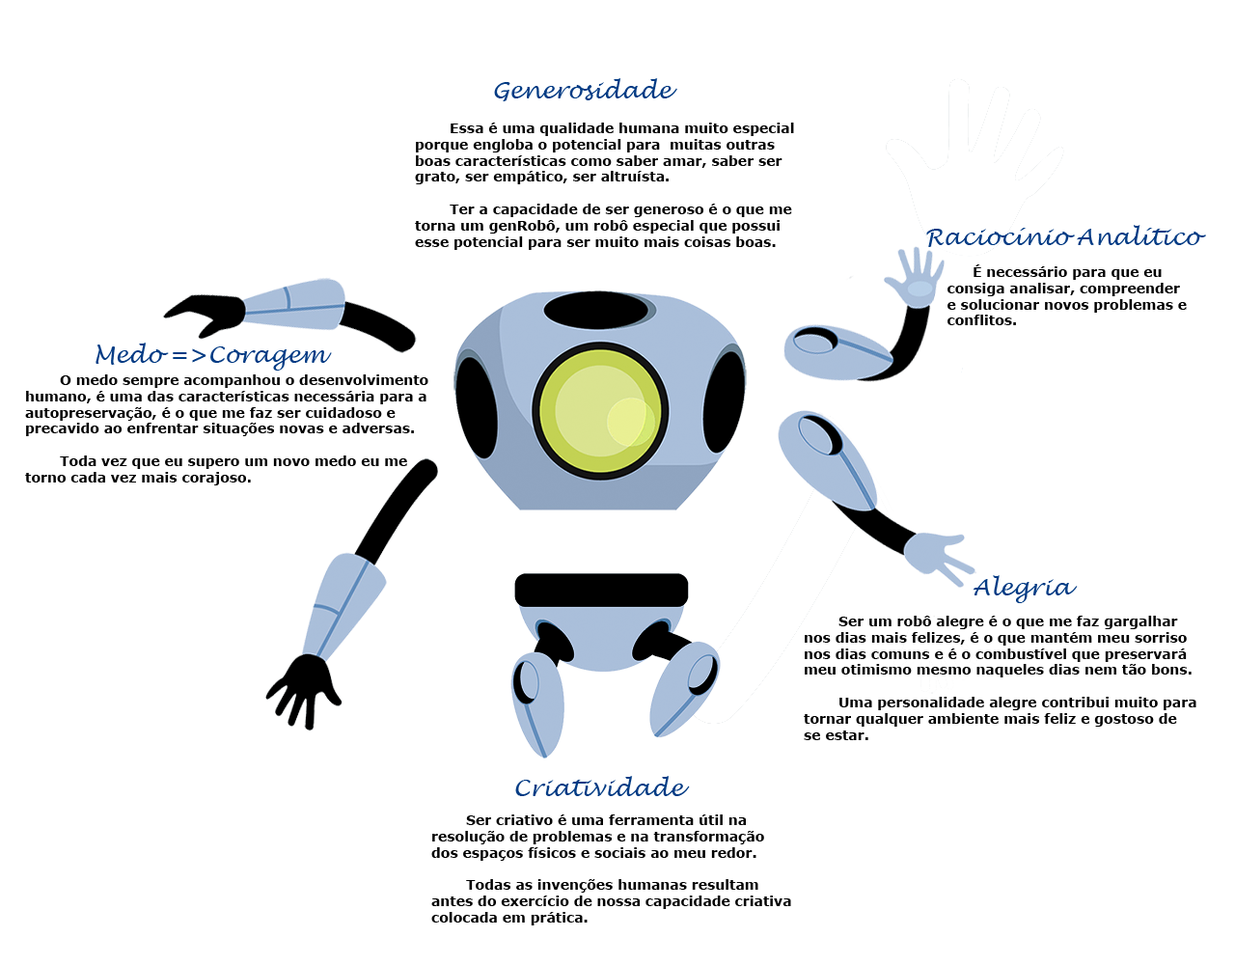
<style>
.page{position:relative;width:1235px;height:965px;background:#ffffff}
.page>*{position:absolute;margin:0}
.t1{font:23.2px "LucidaHandwriting-Italic";color:#023b84}
.t2{font:13.5px "Verdana-Bold";color:#000000}
.t3{font:23.2px "Verdana-Italic";color:#023b84}
</style>
<div class="page">
<p class="t1" style="left:494px;top:78px;width:184px;height:23px">Generosidade</p>
<p class="t2" style="left:415px;top:123px;width:379px;height:127px">Essa é uma qualidade humana muito especial <br>porque engloba o potencial para  muitas outras <br>boas características como saber amar, saber ser<br>grato, ser empático, ser altruísta. <br><br> Ter a capacidade de ser generoso é o que me <br>torna um genRobô, um robô especial que possui <br>esse potencial para ser muito mais coisas boas.</p>
<p class="t1" style="left:927px;top:225px;width:279px;height:22px">Raciocínio Analítico</p>
<p class="t2" style="left:948px;top:264px;width:239px;height:61px">É necessário para que eu <br>       consiga analisar, compreender <br>       e solucionar novos problemas e <br>       conflitos.</p>
<p class="t1" style="left:96px;top:343px;width:236px;height:28px">Medo <span class="t3">=&gt;</span>Coragem</p>
<p class="t2" style="left:25px;top:374px;width:404px;height:111px">O medo sempre acompanhou o desenvolvimento<br>humano, é uma das características necessária para a<br>autopreservação, é o que me faz ser cuidadoso e <br>precavido ao enfrentar situações novas e adversas. <br><br> Toda vez que eu supero um novo medo eu me <br>torno cada vez mais corajoso.</p>
<p class="t1" style="left:973px;top:575px;width:105px;height:28px">Alegria</p>
<p class="t2" style="left:804px;top:616px;width:393px;height:124px">Ser um robô alegre é o que me faz gargalhar <br>nos dias mais felizes, é o que mantém meu sorriso <br>nos dias comuns e é o combustível que preservará <br>meu otimismo mesmo naqueles dias nem tão bons. <br><br> Uma personalidade alegre contribui muito para <br>tornar qualquer ambiente mais feliz e gostoso de <br>se estar.</p>
<p class="t1" style="left:515px;top:776px;width:175px;height:20px">Criatividade</p>
<p class="t2" style="left:431px;top:815px;width:360px;height:111px">Ser criativo é uma ferramenta útil na <br>resolução de problemas e na transformação <br>dos espaços físicos e sociais ao meu redor. <br><br> Todas as invenções humanas resultam <br>antes do exercício de nossa capacidade criativa <br>colocada em prática.</p>
</div>
